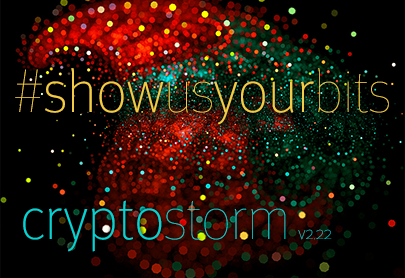
<style>
.page{position:relative;width:405px;height:278px;background:#000000}
.page>*{position:absolute;margin:0}
.t1{font:60px "MetaOT-Thin";color:#f3cb44}
.t2{font:60px "MetaOT-Hair";color:#f3cb44}
.t3{font:60px "MetaOT-Thin";color:#07d4d2}
.t4{font:60px "MetaOT-Hair";color:#07d4d2}
.t5{font:18px "MetaOT-Hair"}
</style>
<div class="page">
<p class="t1" style="left:15px;top:68px;width:374px;height:57px"><span class="t2">#</span>show<span class="t2">us</span>your<span class="t2">bits</span></p>
<p class="t3" style="left:23px;top:200px;width:263px;height:52px">crypto<span class="t4">storm</span></p>
<p class="t5" style="left:298px;top:229px;width:34px;height:11px">v2.22</p>
</div>
